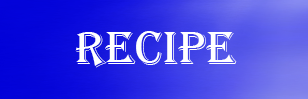
<style>
.page{position:relative;width:308px;height:99px}
.page>*{position:absolute;margin:0}
.t1{font:48px "Algerian";color:#ffffff}
</style>
<div class="page">
<p class="t1" style="left:75px;top:31px;width:162px;height:37px">Recipe</p>
</div>
